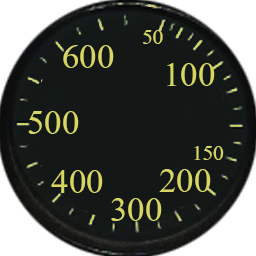
<style>
.page{position:relative;width:256px;height:256px;background:#131817}
.page>*{position:absolute;margin:0}
.t1{font:27.5px "Kokila";color:#d7d663}
.t2{font:45px "Kokila";color:#d7d663}
</style>
<div class="page">
<p class="t1" style="left:143px;top:30px;width:20px;height:14px">50</p>
<p class="t2" style="left:63px;top:45px;width:51px;height:23px">600</p>
<p class="t2" style="left:167px;top:63px;width:48px;height:23px">100</p>
<p class="t2" style="left:28px;top:111px;width:51px;height:23px">500</p>
<p class="t1" style="left:194px;top:146px;width:30px;height:14px">150</p>
<p class="t2" style="left:51px;top:170px;width:52px;height:23px">400</p>
<p class="t2" style="left:159px;top:169px;width:52px;height:23px">200</p>
<p class="t2" style="left:111px;top:198px;width:51px;height:23px">300</p>
</div>
